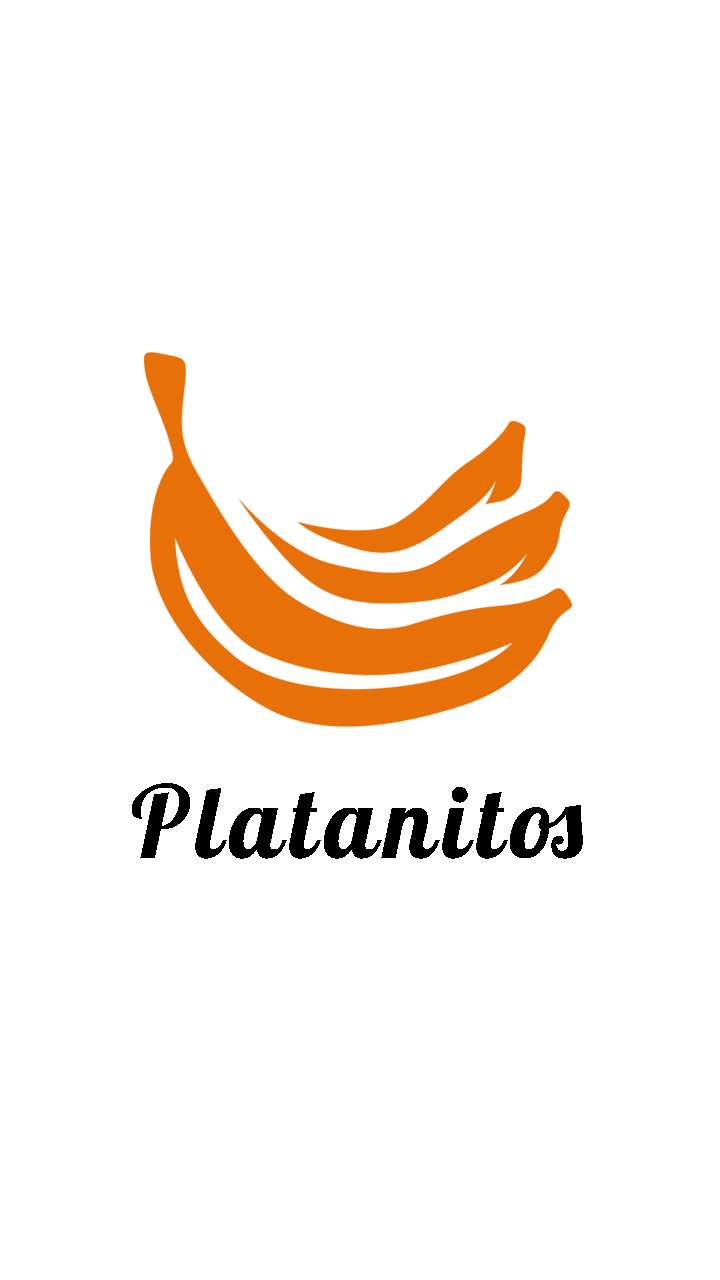
<style>
.page{position:relative;width:720px;height:1280px;background:#ffffff}
.page>*{position:absolute;margin:0}
.t1{font:100px "Lobster-Regular";letter-spacing:0.075em;color:#000000}
</style>
<div class="page">
<p class="t1" style="left:132px;top:783px;width:451px;height:76px">Platanitos</p>
</div>
